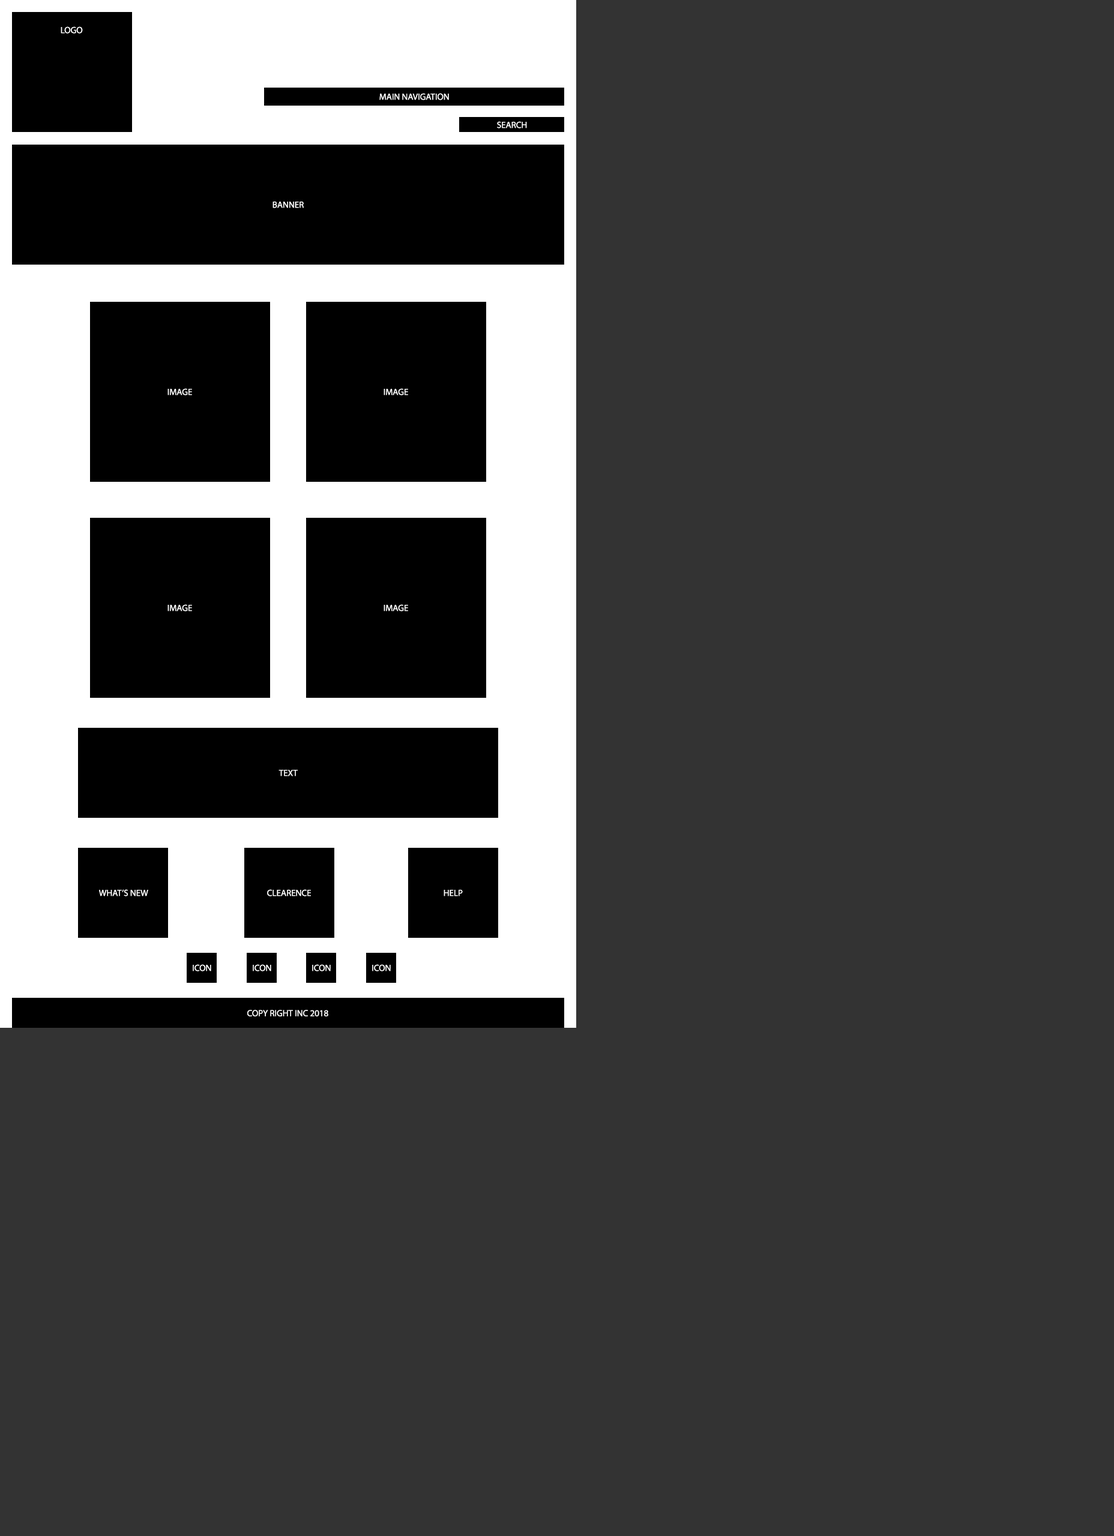
<style>
.page{position:relative;width:1114px;height:1536px;background:#333333}
.page>*{position:absolute;margin:0}
.t1{font:9px "MyriadPro-Regular";color:#ffffff}
</style>
<div class="page">
<p class="t1" style="left:61px;top:26px;width:22px;height:8px">LOGO</p>
<p class="t1" style="left:379px;top:93px;width:70px;height:7px">MAIN NAVIGATION</p>
<p class="t1" style="left:497px;top:121px;width:30px;height:7px">SEARCH</p>
<p class="t1" style="left:272px;top:201px;width:32px;height:7px">BANNER</p>
<p class="t1" style="left:167px;top:388px;width:25px;height:7px">IMAGE</p>
<p class="t1" style="left:383px;top:388px;width:25px;height:7px">IMAGE</p>
<p class="t1" style="left:167px;top:604px;width:25px;height:7px">IMAGE</p>
<p class="t1" style="left:383px;top:604px;width:25px;height:7px">IMAGE</p>
<p class="t1" style="left:278px;top:770px;width:20px;height:6px">TEXT</p>
<p class="t1" style="left:99px;top:889px;width:49px;height:7px">WHAT’S NEW</p>
<p class="t1" style="left:267px;top:889px;width:44px;height:7px">CLEARENCE</p>
<p class="t1" style="left:443px;top:889px;width:20px;height:7px">HELP</p>
<p class="t1" style="left:193px;top:964px;width:18px;height:7px">ICON</p>
<p class="t1" style="left:253px;top:964px;width:18px;height:7px">ICON</p>
<p class="t1" style="left:312px;top:964px;width:19px;height:7px">ICON</p>
<p class="t1" style="left:372px;top:964px;width:19px;height:7px">ICON</p>
<p class="t1" style="left:247px;top:1010px;width:81px;height:6px">COPY RIGHT INC 2018</p>
</div>
